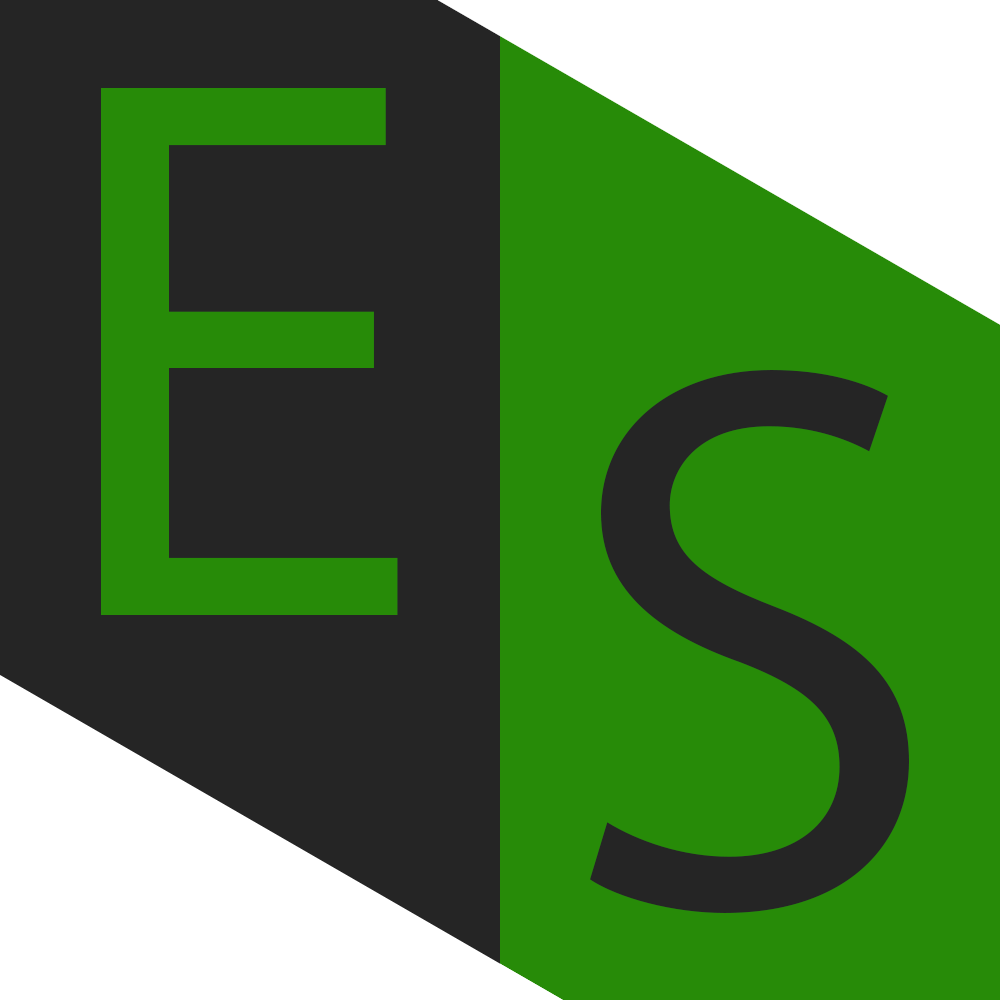
<style>
.page{position:relative;width:1000px;height:1000px;background:#278b08}
.page>*{position:absolute;margin:0}
.t1{font:782.1px "MyriadPro-Regular";color:#278b08}
.t2{font:782.1px "MyriadPro-Regular";color:#252525}
</style>
<div class="page">
<p class="t1" style="left:101px;top:88px;width:297px;height:527px">E</p>
<p class="t2" style="left:590px;top:370px;width:319px;height:543px">S</p>
</div>
